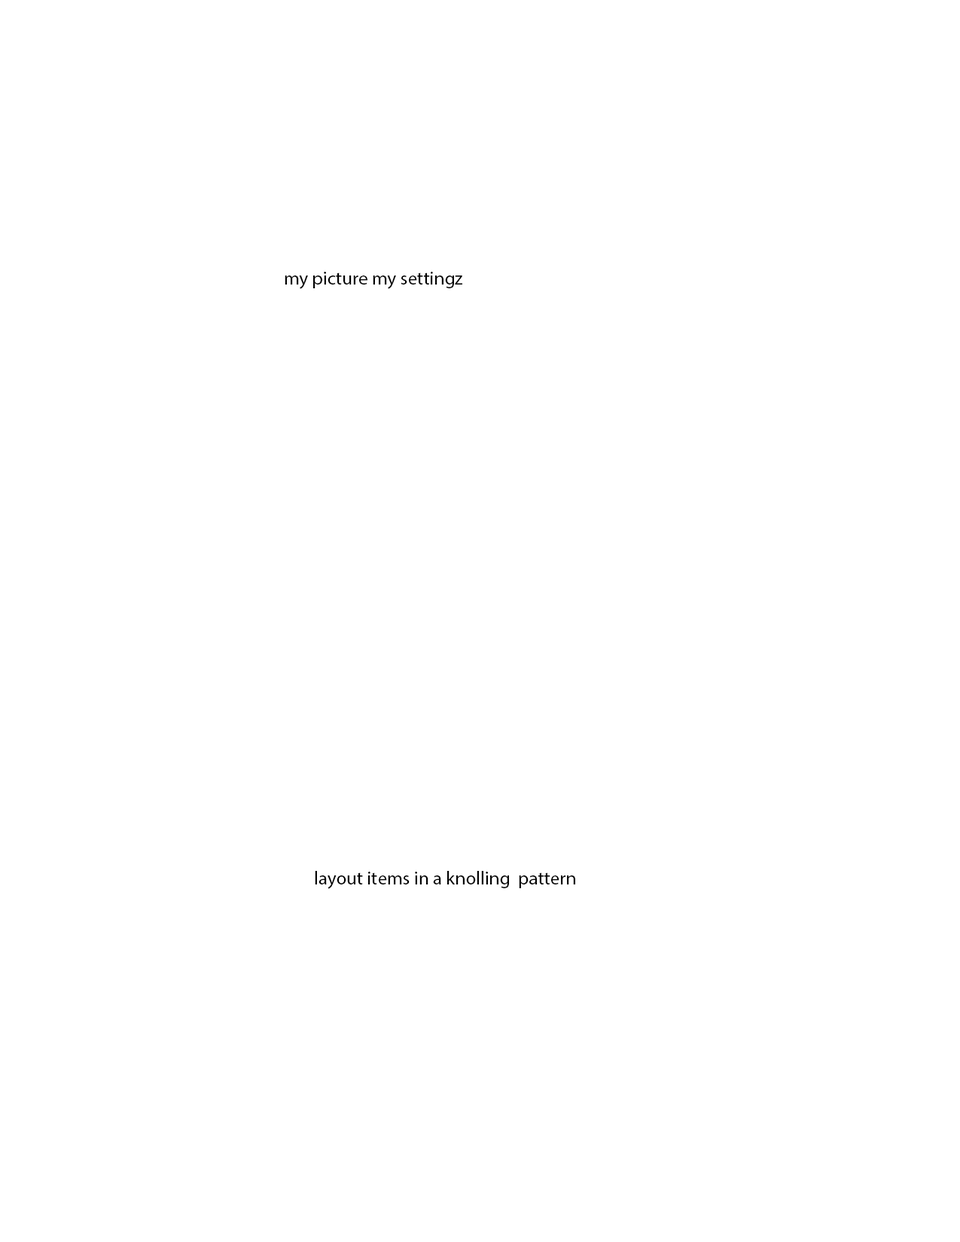
<style>
.page{position:relative;width:960px;height:1242px;background:#ffffff}
.page>*{position:absolute;margin:0}
.t1{font:9px "MyriadPro-Regular";color:#000000}
</style>
<div class="page">
<p class="t1" style="left:285px;top:272px;width:177px;height:17px">my picture my settingz</p>
<p class="t1" style="left:315px;top:871px;width:260px;height:18px">layout items in a knolling  pattern</p>
</div>
